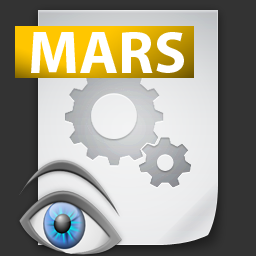
<style>
.page{position:relative;width:256px;height:256px;background:#333333}
.page>*{position:absolute;margin:0}
.t1{font:60px "MyriadPro-Bold";color:#ffffff}
</style>
<div class="page">
<p class="t1" style="left:31px;top:32px;width:153px;height:41px">MARS</p>
</div>
